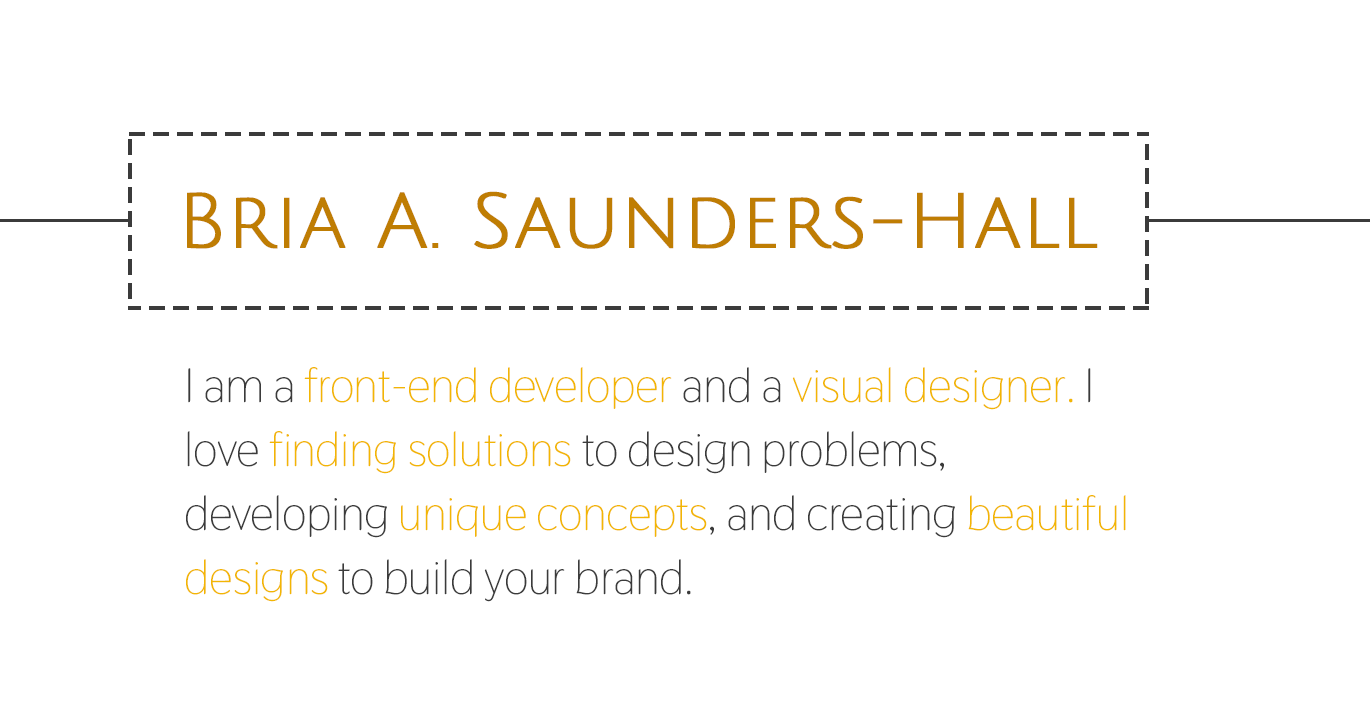
<style>
.page{position:relative;width:1370px;height:712px;background:#ffffff}
.page>*{position:absolute;margin:0}
.t1{font:76px "JuliusSansOne-Regular";color:#bf7d03;font-weight:bold}
.t2{font:48px/64px "Thasadith-Regular";letter-spacing:-0.01em;color:#3b3b3b}
.t3{font:48px/64px "Thasadith-Regular";letter-spacing:-0.01em;color:#3b3b3b;text-transform:uppercase}
.t4{font:48px/64px "Thasadith-Regular";letter-spacing:-0.01em;color:#f2b604}
</style>
<div class="page">
<p class="t1" style="left:187px;top:191px;width:911px;height:58px">Bria A. Saunders-Hall</p>
<p class="t2" style="left:186px;top:367px;width:940px;height:235px"><span class="t3">I </span>am a <span class="t4">front-end developer</span> and a <span class="t4">visual designer.</span> I love <span class="t4">finding solutions</span> to design problems, developing <span class="t4">unique concepts</span>, and creating <span class="t4">beautiful designs</span> to build your brand.</p>
</div>
